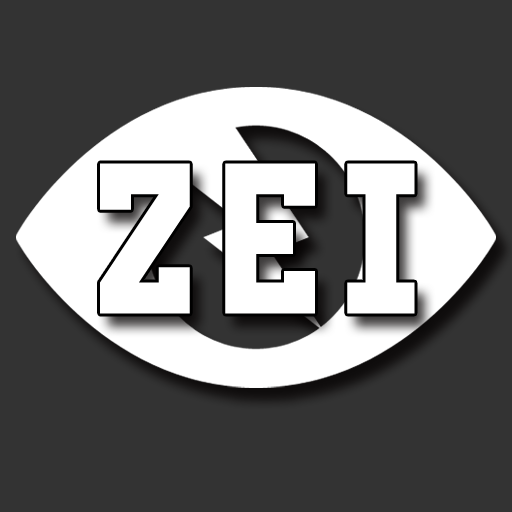
<style>
.page{position:relative;width:512px;height:512px;background:#333333}
.page>*{position:absolute;margin:0}
.t1{font:203.8px "KonstruktorRegular";letter-spacing:0.07em;color:#ffffff;text-transform:uppercase}
</style>
<div class="page">
<p class="t1" style="left:100px;top:163px;width:315px;height:151px">ZEI</p>
</div>
